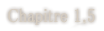
<style>
.page{position:relative;width:104px;height:31px;background:#ffffff}
.page>*{position:absolute;margin:0}
.t1{font:19px "MS-PMincho";color:#d6cdc1;font-weight:bold;scale:0.84 1}
</style>
<div class="page">
<p class="t1" style="left:8px;top:8px;width:87px;height:17px">Chapitre 1.5</p>
</div>
